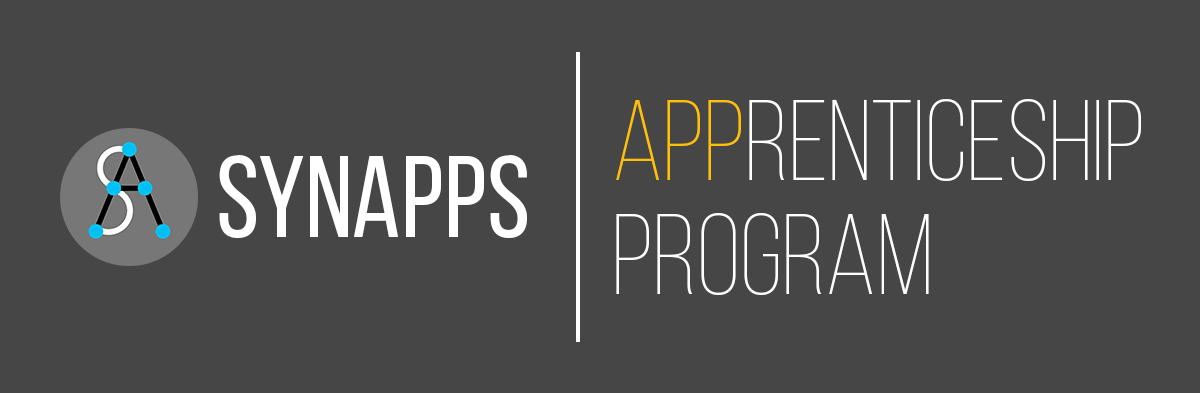
<style>
.page{position:relative;width:1200px;height:393px;background:#464646}
.page>*{position:absolute;margin:0}
.t1{font:114.4px/113.4px "BebasNeueLight";color:#ffffff}
.t2{font:114.4px/113.4px "BebasNeueLight";color:#ffc107}
.t3{font:115.3px "BebasNeueRegular";color:#ffffff}
</style>
<div class="page">
<p class="t1" style="left:616px;top:99px;width:525px;height:196px"><span class="t2">app</span>renticeship<br>program</p>
<p class="t3" style="left:219px;top:155px;width:308px;height:83px">SYNAPPS</p>
</div>
